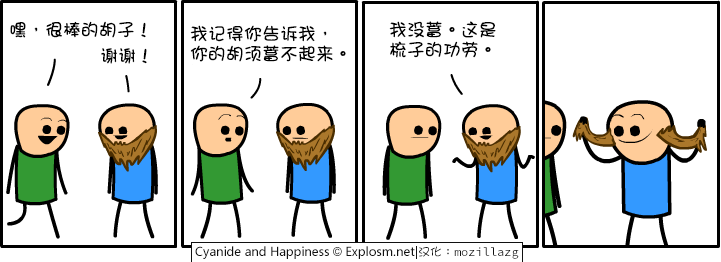
<style>
.page{position:relative;width:721px;height:262px;background:#ffffff}
.page>*{position:absolute;margin:0}
.t1{font:18px "DFGirl";color:#000000}
.t2{font:18px/20px "DFGirl";color:#000000}
</style>
<div class="page">
<p class="t1" style="left:10px;top:21px;width:136px;height:17px">嘿，很棒的胡子！</p>
<p class="t2" style="left:190px;top:25px;width:156px;height:37px">我记得你告诉我，<br>你的胡须蓄不起来。</p>
<p class="t2" style="left:389px;top:21px;width:107px;height:37px">我没蓄。这是<br>梳子的功劳。</p>
<p class="t1" style="left:101px;top:48px;width:46px;height:16px">谢谢！</p>
</div>
